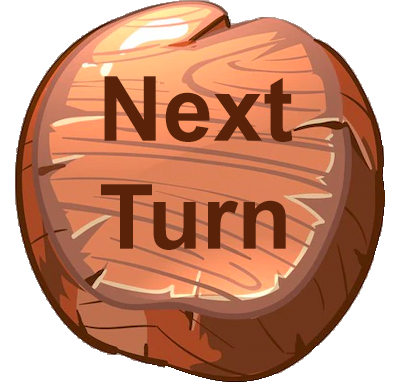
<style>
.page{position:relative;width:400px;height:383px;background:#ffffff}
.page>*{position:absolute;margin:0}
.t1{font:90px "Arial-BoldMT";color:#5b220a}
</style>
<div class="page">
<p class="t1" style="left:101px;top:76px;width:192px;height:174px;text-align:center">Next<br>Turn</p>
</div>
